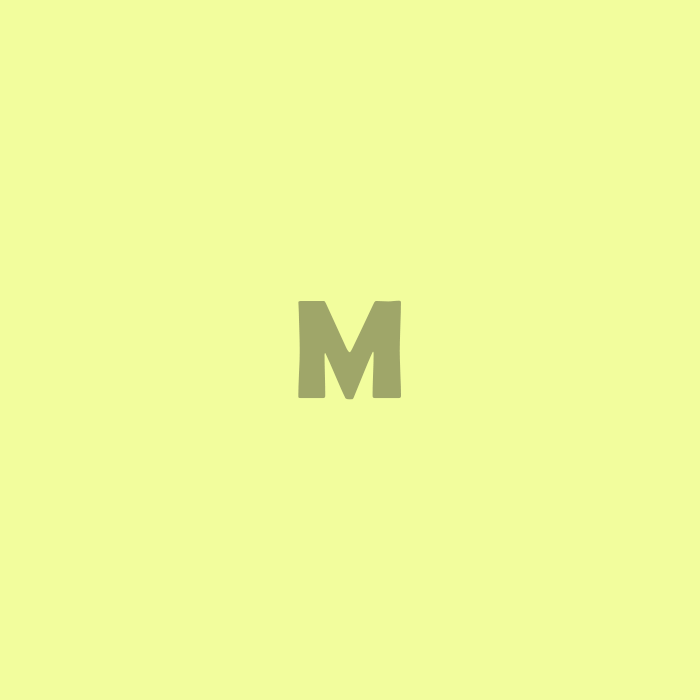
<style>
.page{position:relative;width:700px;height:700px;background:#f2fd9d}
.page>*{position:absolute;margin:0}
.t1{font:141.1px "BerlinSansFBDemi-Bold";color:#9fa669}
</style>
<div class="page">
<p class="t1" style="left:298px;top:300px;width:103px;height:100px">M</p>
</div>
